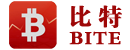
<style>
.page{position:relative;width:130px;height:50px;background:#ffffff}
.page>*{position:absolute;margin:0}
.t1{font:19.3px/22.8px "FZDBSJW--GB1-0";letter-spacing:0.05em;color:#9e0707;font-weight:bold}
.t2{font:24.3px/22.8px "FZDBSJW--GB1-0";letter-spacing:0.07em;color:#9e0707;font-weight:bold}
</style>
<div class="page">
<p class="t1" style="left:69px;top:5px;width:53px;height:40px;text-align:center"><span class="t2">比特<br></span>BITE</p>
</div>
